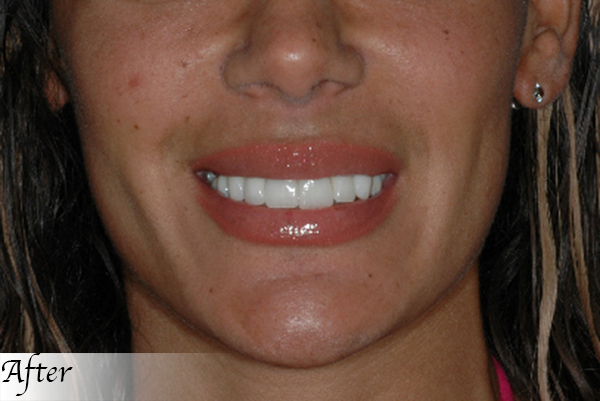
<style>
.page{position:relative;width:600px;height:401px}
.page>*{position:absolute;margin:0}
.t1{font:56px "Apple-Chancery";color:#000000}
</style>
<div class="page">
<p class="t1" style="left:2px;top:353px;width:71px;height:43px">After</p>
</div>
